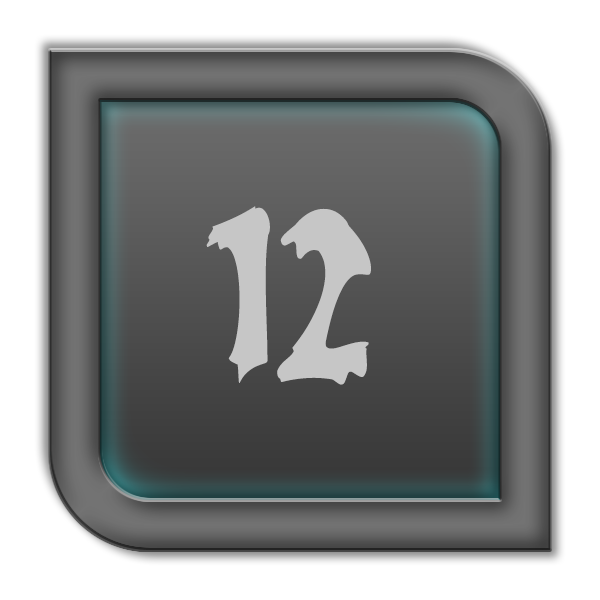
<style>
.page{position:relative;width:600px;height:600px;background:#ffffff}
.page>*{position:absolute;margin:0}
.t1{font:240px "TOXIA";color:#c6c6c6;scale:0.83 1}
</style>
<div class="page">
<p class="t1" style="left:206px;top:206px;width:165px;height:179px">12</p>
</div>
